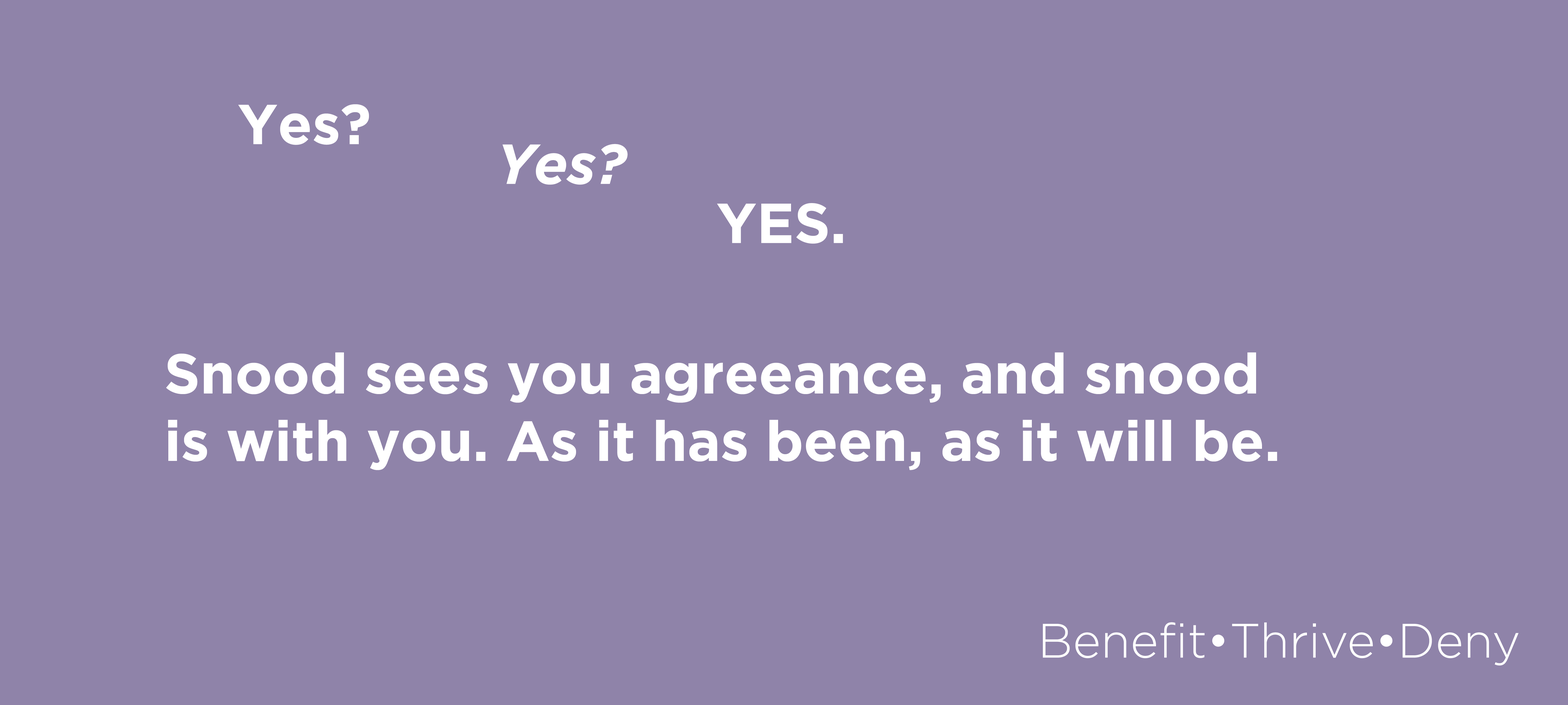
<style>
.page{position:relative;width:1568px;height:705px;background:#8f83a9}
.page>*{position:absolute;margin:0}
.t1{font:56.2px "Gotham-Bold";color:#ffffff}
.t2{font:56.2px "Gotham-BoldItalic";color:#ffffff}
.t3{font:48.1px "Gotham-Light";color:#ffffff}
</style>
<div class="page">
<p class="t1" style="left:238px;top:104px;width:131px;height:41px">Yes?</p>
<p class="t2" style="left:502px;top:144px;width:126px;height:41px">Yes?</p>
<p class="t1" style="left:717px;top:203px;width:126px;height:41px">YES.</p>
<p class="t1" style="left:166px;top:352px;width:1111px;height:118px">Snood sees you agreeance, and snood is with you. As it has been, as it will be.</p>
<p class="t3" style="left:1043px;top:622px;width:476px;height:44px">Benefit•Thrive•Deny</p>
</div>
